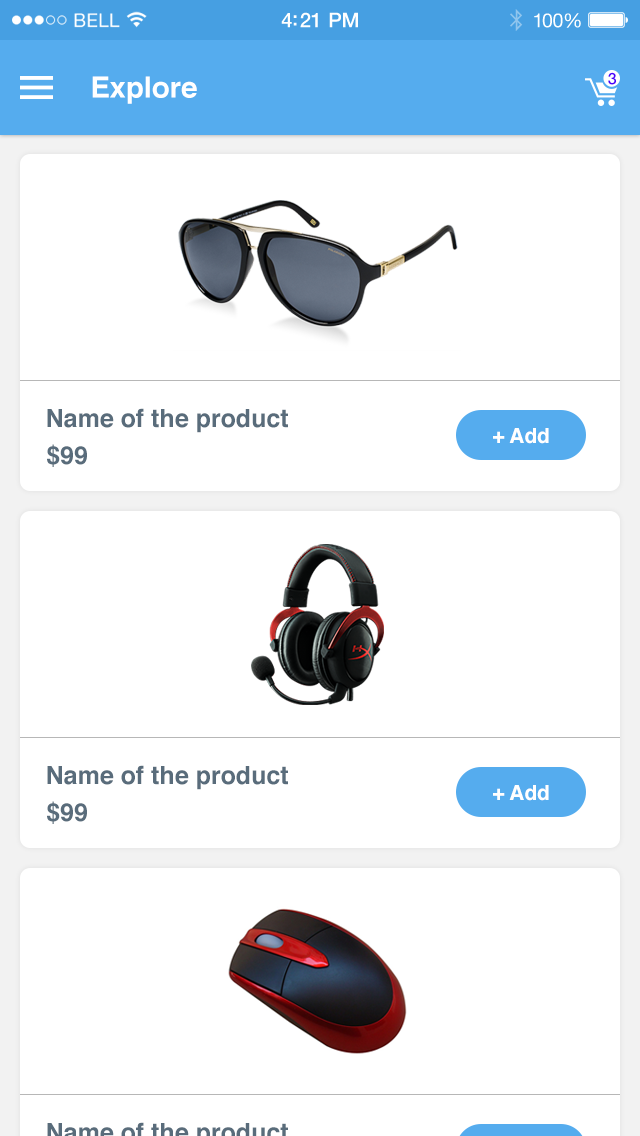
<style>
.page{position:relative;width:640px;height:1136px;background:#ffffff}
.page>*{position:absolute;margin:0}
.t1{font:20.4px "HelveticaNeue-Medium";letter-spacing:-0.02em;color:#ffffff}
.t2{font:19.6px "HelveticaNeue";letter-spacing:-0.02em;color:#ffffff}
.t3{font:29.2px "Helvetica-Bold";color:#ffffff}
.t4{font:16px "HelveticaNeue-Medium";color:#4c00fa}
.t5{font:25px "Helvetica-Bold";color:#596c7b}
.t6{font:20.8px "Helvetica-Bold";color:#ffffff}
</style>
<div class="page">
<p class="t1" style="left:281px;top:12px;width:77px;height:16px">4:21 PM</p>
<p class="t2" style="left:534px;top:13px;width:47px;height:15px">100%</p>
<p class="t3" style="left:92px;top:76px;width:105px;height:28px">Explore</p>
<p class="t4" style="left:608px;top:72px;width:9px;height:13px">3</p>
<p class="t5" style="left:47px;top:408px;width:241px;height:25px">Name of the product</p>
<p class="t6" style="left:493px;top:428px;width:56px;height:16px">+ Add</p>
<p class="t5" style="left:47px;top:444px;width:40px;height:23px">$99</p>
<p class="t5" style="left:47px;top:765px;width:241px;height:25px">Name of the product</p>
<p class="t6" style="left:493px;top:785px;width:56px;height:16px">+ Add</p>
<p class="t5" style="left:47px;top:801px;width:40px;height:23px">$99</p>
</div>
